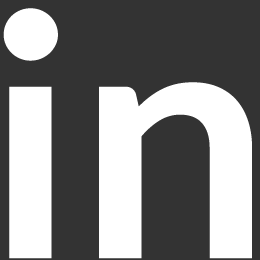
<style>
.page{position:relative;width:260px;height:260px;background:#333333}
.page>*{position:absolute;margin:0}
.t1{font:81.1px/1934.3px "Lato-Bold";color:#ffffff}
</style>
<div class="page">
<p class="t1" style="left:3px;top:8px;width:249px;height:251px;text-align:center">in</p>
</div>
